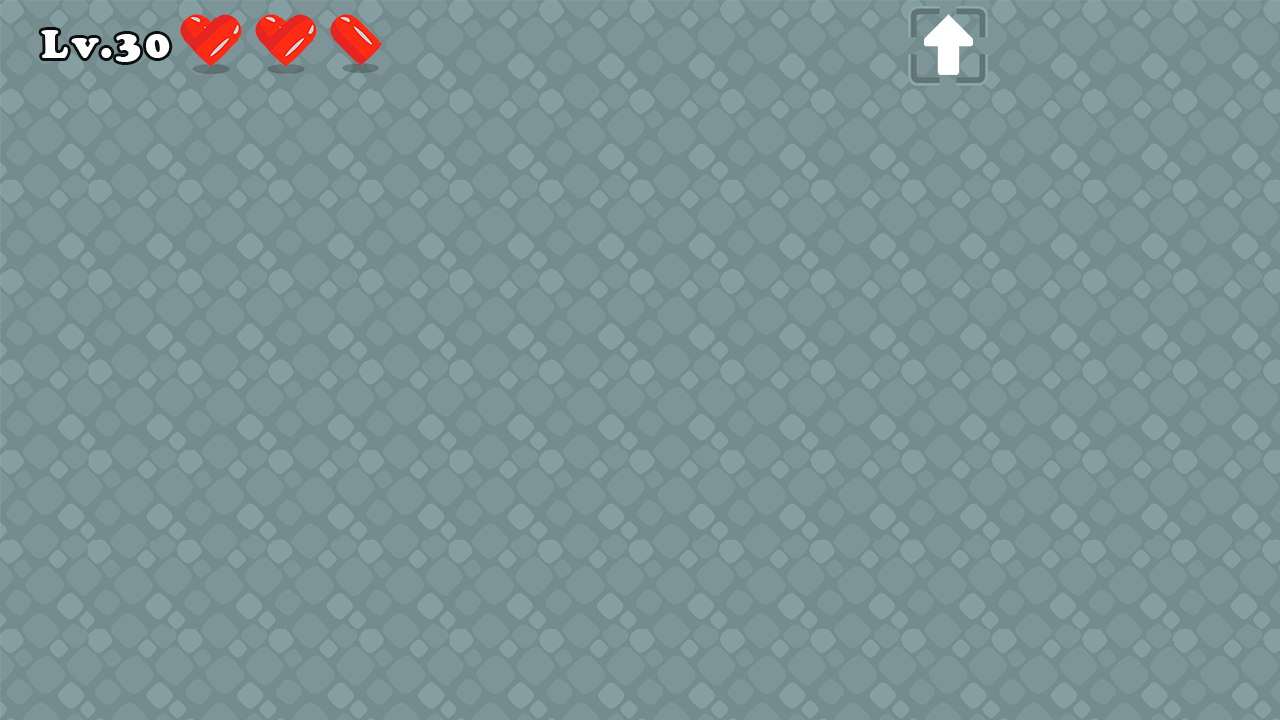
<style>
.page{position:relative;width:1280px;height:720px;background:#7d9598}
.page>*{position:absolute;margin:0}
.t1{font:41.7px "CooperBlack";letter-spacing:0.1em;color:#ffffff}
</style>
<div class="page">
<p class="t1" style="left:41px;top:30px;width:129px;height:32px">Lv.30</p>
</div>
